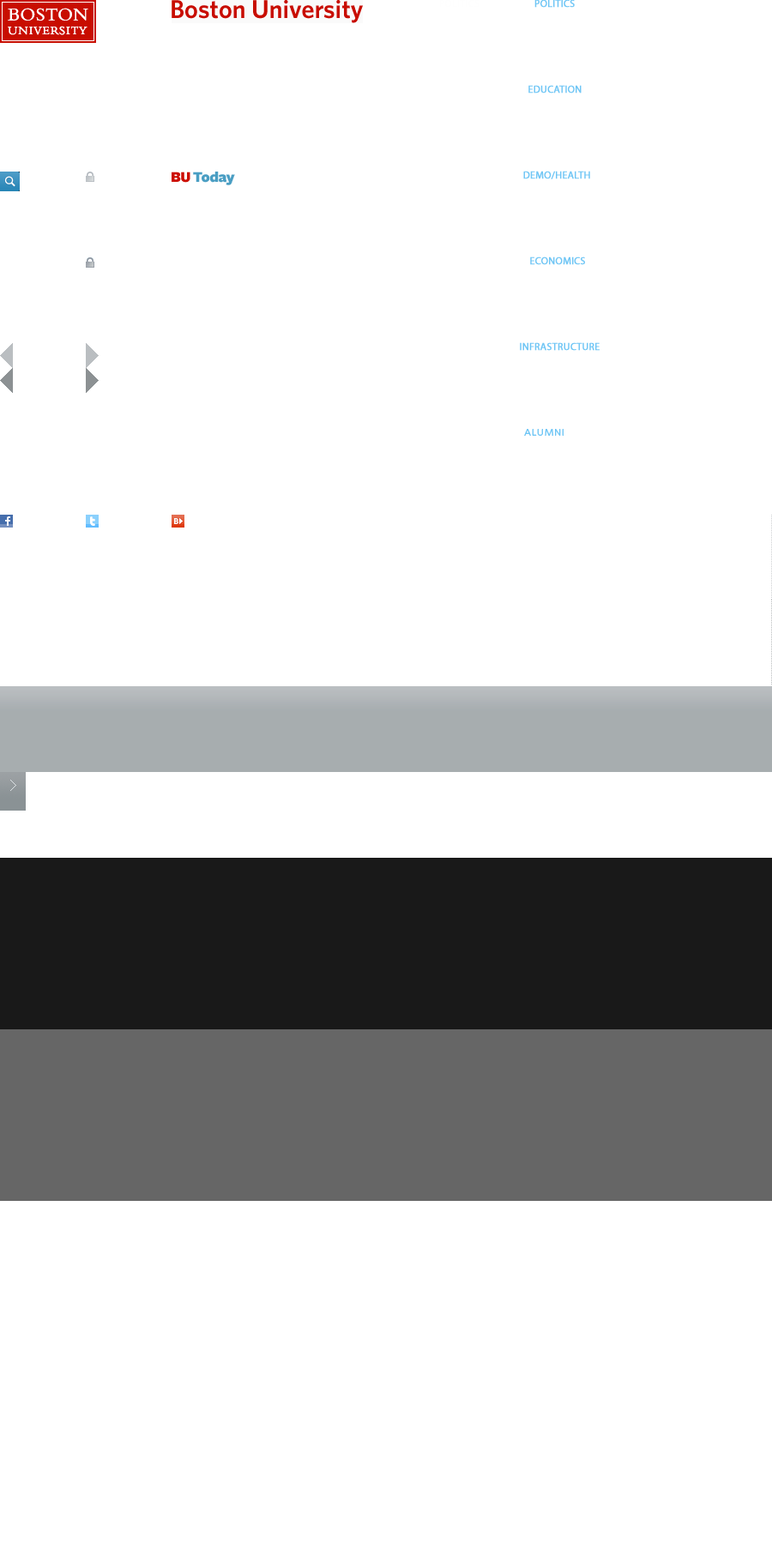
<style>
.page{position:relative;width:772px;height:1544px;background:#ffffff}
.page>*{position:absolute;margin:0}
.t1{font:10.3px "MyriadPro-Regular";color:#70c6f5;font-weight:bold}
</style>
<div class="page">
<p class="t1" style="left:534px;top:0px;width:41px;height:8px">POLITICS</p>
<p class="t1" style="left:528px;top:85px;width:54px;height:9px">EDUCATION</p>
<p class="t1" style="left:523px;top:171px;width:67px;height:8px">DEMO/HEALTH</p>
<p class="t1" style="left:530px;top:257px;width:55px;height:8px">ECONOMICS</p>
<p class="t1" style="left:520px;top:342px;width:80px;height:9px">INFRASTRUCTURE</p>
</div>
